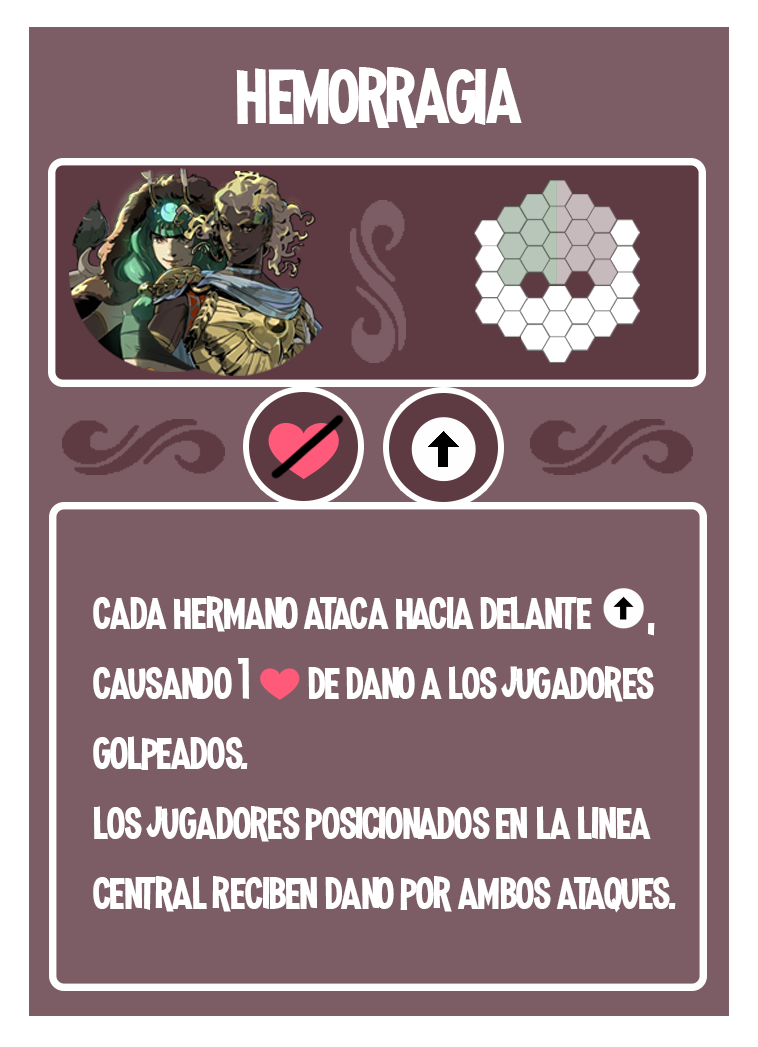
<style>
.page{position:relative;width:758px;height:1047px;background:#7d5d65}
.page>*{position:absolute;margin:0}
.t1{font:100px "MadnessHyperactive";color:#ffffff}
.t2{font:58.3px "MadnessHyperactive";color:#ffffff}
.t3{font:41.7px "EmojiOneColor";color:#ffffff}
</style>
<div class="page">
<p class="t1" style="left:236px;top:67px;width:286px;height:61px">hemorragia</p>
<p class="t2" style="left:93px;top:596px;width:583px;height:317px">cada hermano ataca hacia delante       , causando 1 <span class="t3">❤️ </span>de dano a los jugadores golpeados.<br>los jugadores posicionados en la linea central reciben dano por ambos ataques.</p>
</div>
